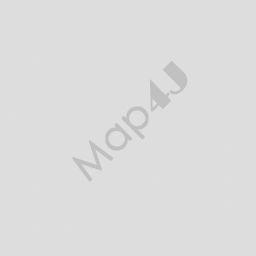
<style>
.page{position:relative;width:256px;height:256px;background:#dddddd}
.page>*{position:absolute;margin:0}
.t1{font:40px "CenturyGothic";color:#c0c0c0;font-weight:bold}
.t2{font:40px "Broadway";color:#c0c0c0;font-weight:bold}
</style>
<div class="page">
<p class="t1" style="left:72px;top:61px;width:116px;height:121px;rotate:-45deg">Map<span class="t2">4J</span></p>
</div>
